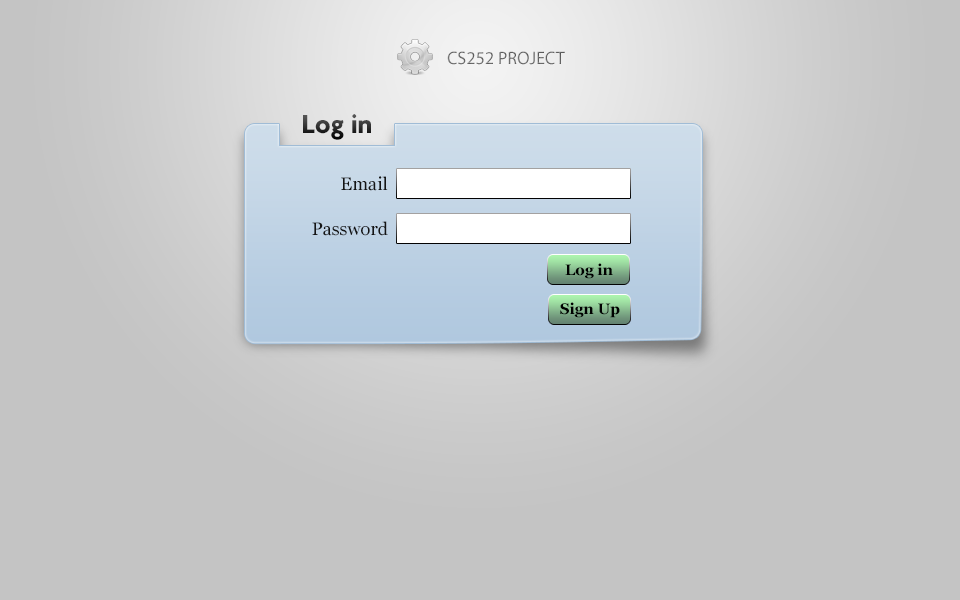
<style>
.page{position:relative;width:960px;height:600px;background:#c4c4c4}
.page>*{position:absolute;margin:0}
.t1{font:18px "MyriadPro-Regular";color:#686868;text-transform:uppercase}
.t2{font:28px "Agenda-Bold"}
.t3{font:18px "Georgia";color:#141414}
.t4{font:15px "Georgia-Bold";color:#000000}
</style>
<div class="page">
<p class="t1" style="left:447px;top:51px;width:118px;height:14px">CS252 Project</p>
<p class="t2" style="left:303px;top:114px;width:68px;height:26px">Log in</p>
<p class="t3" style="left:341px;top:176px;width:47px;height:15px">Email</p>
<p class="t3" style="left:312px;top:221px;width:76px;height:15px">Password</p>
<p class="t4" style="left:565px;top:263px;width:48px;height:16px">Log in</p>
<p class="t4" style="left:560px;top:302px;width:60px;height:16px">Sign Up</p>
</div>
